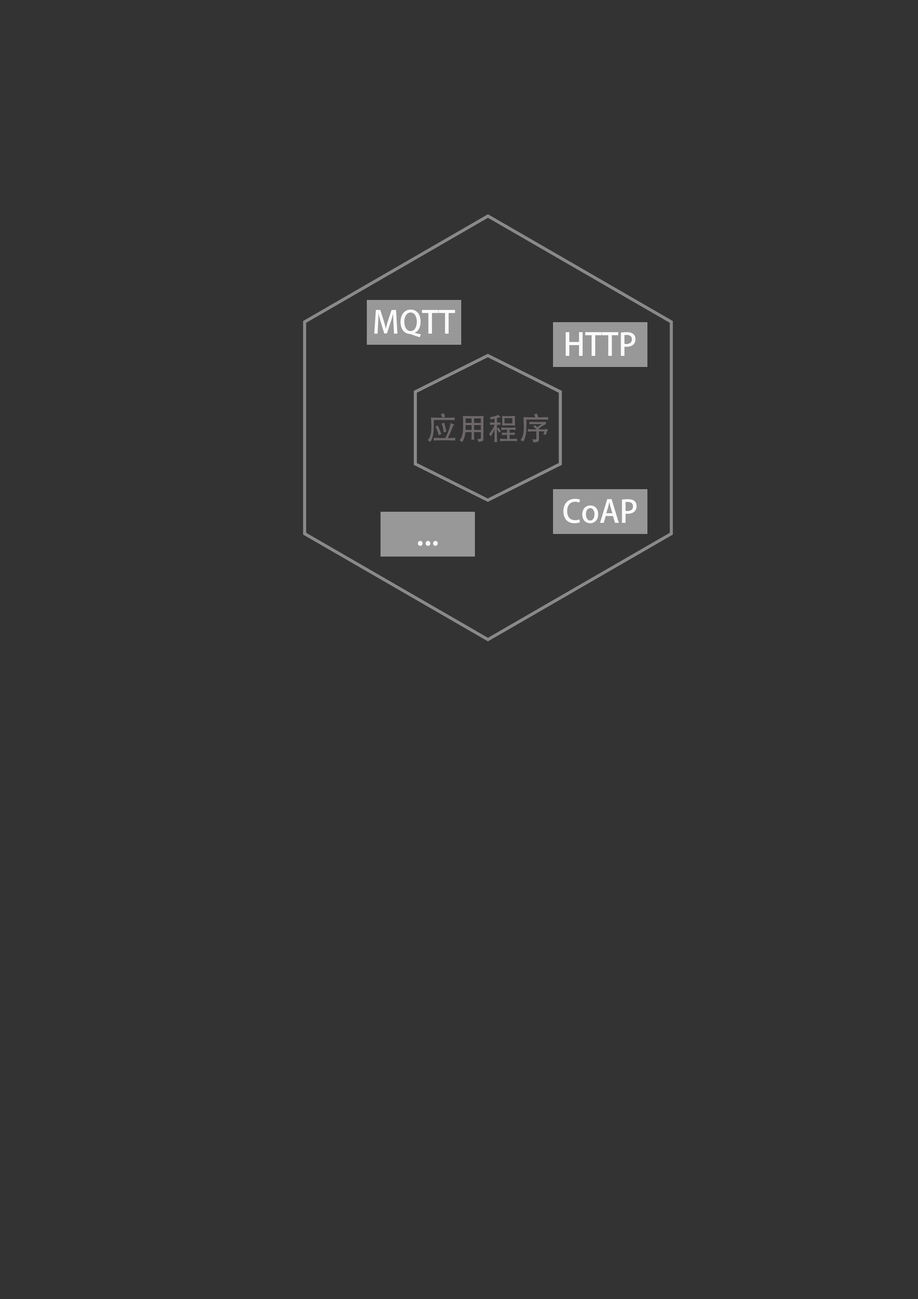
<style>
.page{position:relative;width:918px;height:1299px;background:#333333}
.page>*{position:absolute;margin:0}
.t1{font:30.9px "AdobeHeitiStd-Regular";color:#fafafa}
.t2{font:30.9px "AdobeHeitiStd-Regular";color:#6d676a}
</style>
<div class="page">
<p class="t1" style="left:374px;top:310px;width:81px;height:27px">MQTT</p>
<p class="t1" style="left:566px;top:332px;width:70px;height:24px">HTTP</p>
<p class="t2" style="left:428px;top:413px;width:120px;height:29px">应用程序</p>
<p class="t1" style="left:563px;top:499px;width:74px;height:24px">CoAP</p>
<p class="t1" style="left:418px;top:541px;width:20px;height:5px">...</p>
</div>
